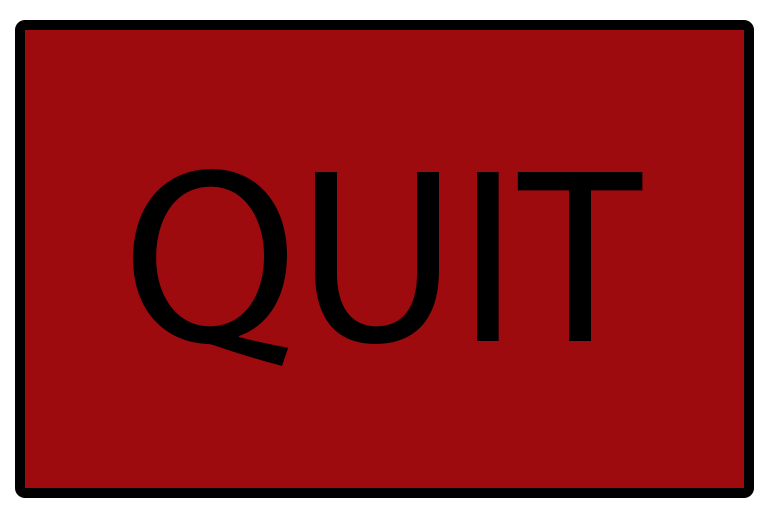
<style>
.page{position:relative;width:768px;height:512px;background:#9e0b0f}
.page>*{position:absolute;margin:0}
.t1{font:250px "MyriadPro-Regular";color:#000000}
</style>
<div class="page">
<p class="t1" style="left:133px;top:169px;width:510px;height:197px">QUIT</p>
</div>
